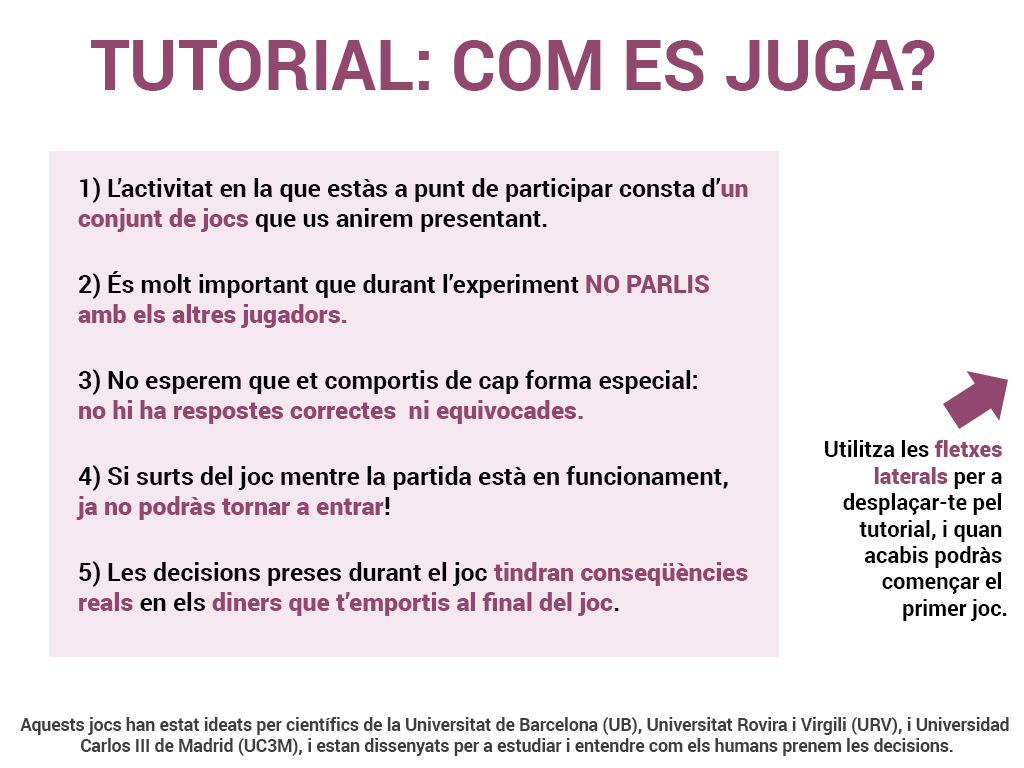
<style>
.page{position:relative;width:1024px;height:768px;background:#ffffff}
.page>*{position:absolute;margin:0}
.t1{font:70px "Roboto-Bold";color:#92476e}
.t2{font:25px "Roboto-Bold";color:#000000}
.t3{font:25px "Roboto-Black";color:#92476e}
.t4{font:22px "Roboto-Bold";color:#000000}
.t5{font:25px "Roboto-Regular";color:#000000}
.t6{font:22px "Roboto-Black";color:#92476e}
.t7{font:17.5px "Roboto-Bold";color:#3f3f3f}
</style>
<div class="page">
<p class="t1" style="left:91px;top:40px;width:844px;height:51px">TUTORIAL: COM ES JUGA?</p>
<p class="t2" style="left:76px;top:177px;width:672px;height:439px">1) L’activitat en la que estàs a punt de participar consta d’<span class="t3">un <br>conjunt de jocs</span> que us anirem presentant.<br><br>2) És molt important que durant l’experiment <span class="t3">NO PARLIS <br>amb els altres jugadors.<br><br></span>3) No esperem que et comportis de cap forma especial: <br><span class="t3">no hi ha respostes correctes  ni equivocades.<br><br></span>4) Si surts del joc mentre la partida està en funcionament, <br><span class="t3">ja no podràs tornar a entrar</span>!<br><br>5) Les decisions preses durant el joc <span class="t3">tindran conseqüències <br>reals</span> en els <span class="t3">diners que t’emportis al final del joc</span>.</p>
<p class="t4" style="left:825px;top:440px;width:182px;height:181px"><span class="t5"><br><br><br></span>Utilitza les <span class="t6">fletxes <br>laterals </span>per a <br>desplaçar-te pel <br>tutorial, i quan <br>acabis podràs <br>començar el <br>primer joc.</p>
<p class="t7" style="left:20px;top:717px;width:989px;height:39px;text-align:center">Aquests jocs han estat ideats per científics de la Universitat de Barcelona (UB), Universitat Rovira i Virgili (URV), i Universidad <br>Carlos III de Madrid (UC3M), i estan dissenyats per a estudiar i entendre com els humans prenem les decisions.</p>
</div>
